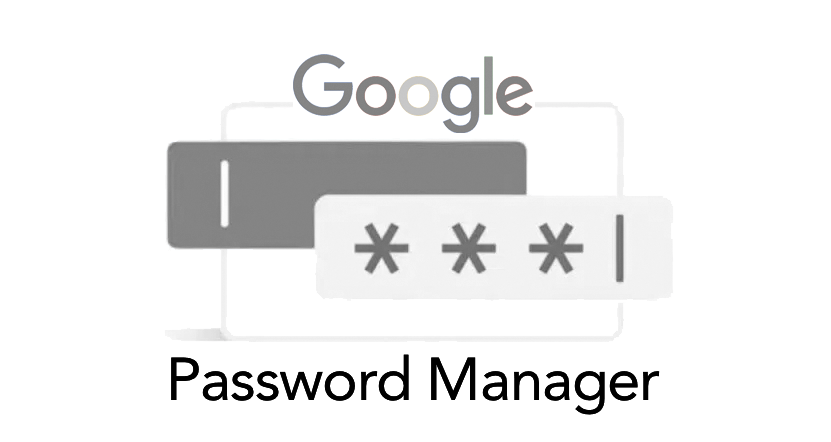
<style>
.page{position:relative;width:831px;height:442px;background:#ffffff}
.page>*{position:absolute;margin:0}
.t1{font:60px "Avenir-Roman";letter-spacing:-0.02em;color:#000000}
</style>
<div class="page">
<p class="t1" style="left:171px;top:354px;width:489px;height:61px">Password Manager</p>
</div>
